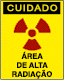
<style>
.page{position:relative;width:64px;height:80px;background:#ffef00}
.page>*{position:absolute;margin:0}
.t1{font:8.5px "ArialMT";letter-spacing:0.07em;color:#e7d600;font-weight:bold;scale:1.14 1}
.t2{font:7.6px/9px "Helvetica-Bold";color:#000000}
</style>
<div class="page">
<p class="t1" style="left:7px;top:4px;width:51px;height:8px">CUIDADO</p>
<p class="t2" style="left:12px;top:51px;width:40px;height:28px;text-align:center">ÁREA<br>DE ALTA<br>RADIAÇÃO</p>
</div>
